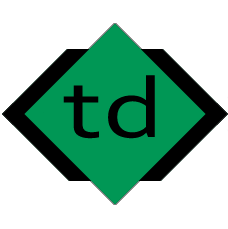
<style>
.page{position:relative;width:228px;height:229px;background:#ffffff}
.page>*{position:absolute;margin:0}
.t1{font:86.8px "Corbel";color:#000000;scale:1.3 1}
</style>
<div class="page">
<p class="t1" style="left:63px;top:75px;width:92px;height:64px">td</p>
</div>
